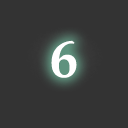
<style>
.page{position:relative;width:128px;height:128px;background:#333333}
.page>*{position:absolute;margin:0}
.t1{font:56px "Dreaming-of-Lilian";color:#ffffff}
</style>
<div class="page">
<p class="t1" style="left:51px;top:40px;width:26px;height:38px">6</p>
</div>
